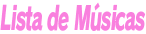
<style>
.page{position:relative;width:146px;height:34px;background:#ffffff}
.page>*{position:absolute;margin:0}
.t1{font:32px "RodinPro-EB";letter-spacing:-0.051em;color:#f980de;font-style:italic;scale:0.56 1}
</style>
<div class="page">
<p class="t1" style="left:0px;top:2px;width:146px;height:29px">Lista de Músicas</p>
</div>
